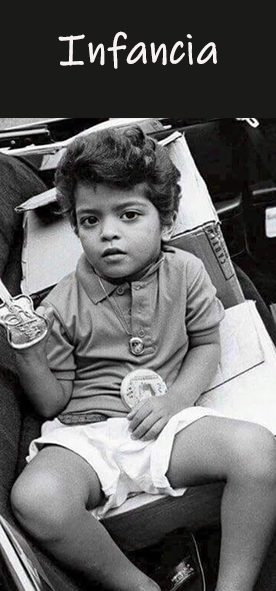
<style>
.page{position:relative;width:276px;height:591px}
.page>*{position:absolute;margin:0}
.t1{font:41.7px "InkFree";color:#f8f3f0;font-weight:bold}
</style>
<div class="page">
<p class="t1" style="left:58px;top:31px;width:159px;height:38px">Infancia</p>
</div>
